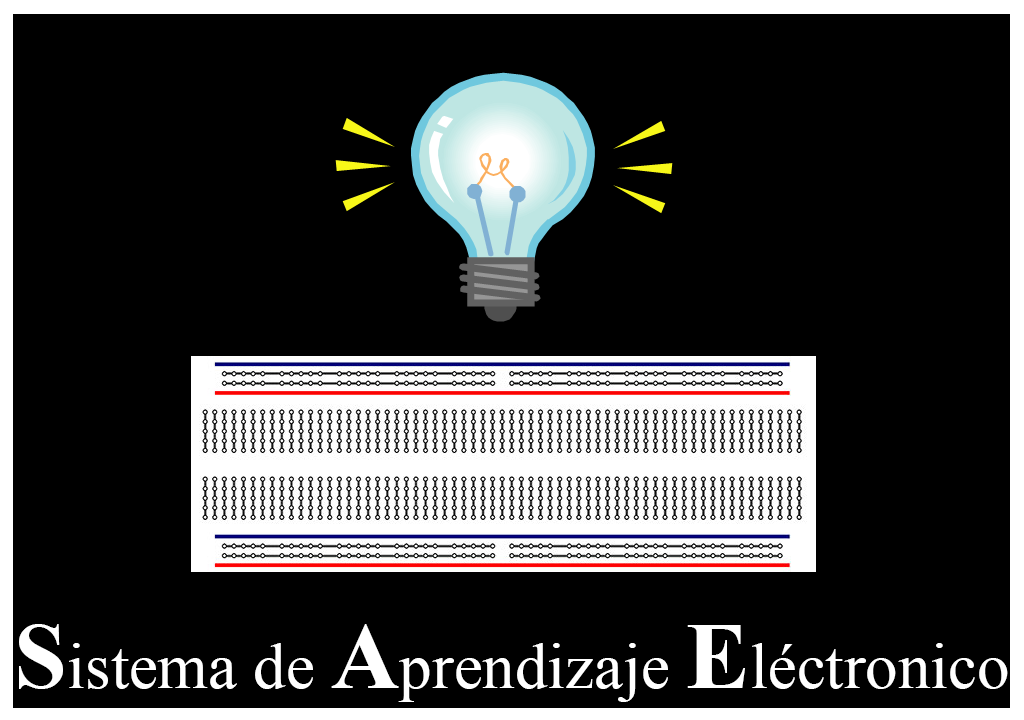
<style>
.page{position:relative;width:1024px;height:720px;background:#000000}
.page>*{position:absolute;margin:0}
.t1{font:65px "TimesNewRomanPSMT";color:#ffffff}
.t2{font:95px "TimesNewRomanPS-BoldMT";color:#ffffff}
</style>
<div class="page">
<p class="t1" style="left:19px;top:624px;width:989px;height:78px"><span class="t2">S</span>istema de <span class="t2">A</span>prendizaje <span class="t2">E</span>léctronico</p>
</div>
